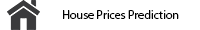
<style>
.page{position:relative;width:200px;height:30px;background:#ffffff}
.page>*{position:absolute;margin:0}
.t1{font:12px "MyriadPro-Regular";color:#000000}
</style>
<div class="page">
<p class="t1" style="left:63px;top:10px;width:116px;height:9px">House Prices Prediction</p>
</div>
